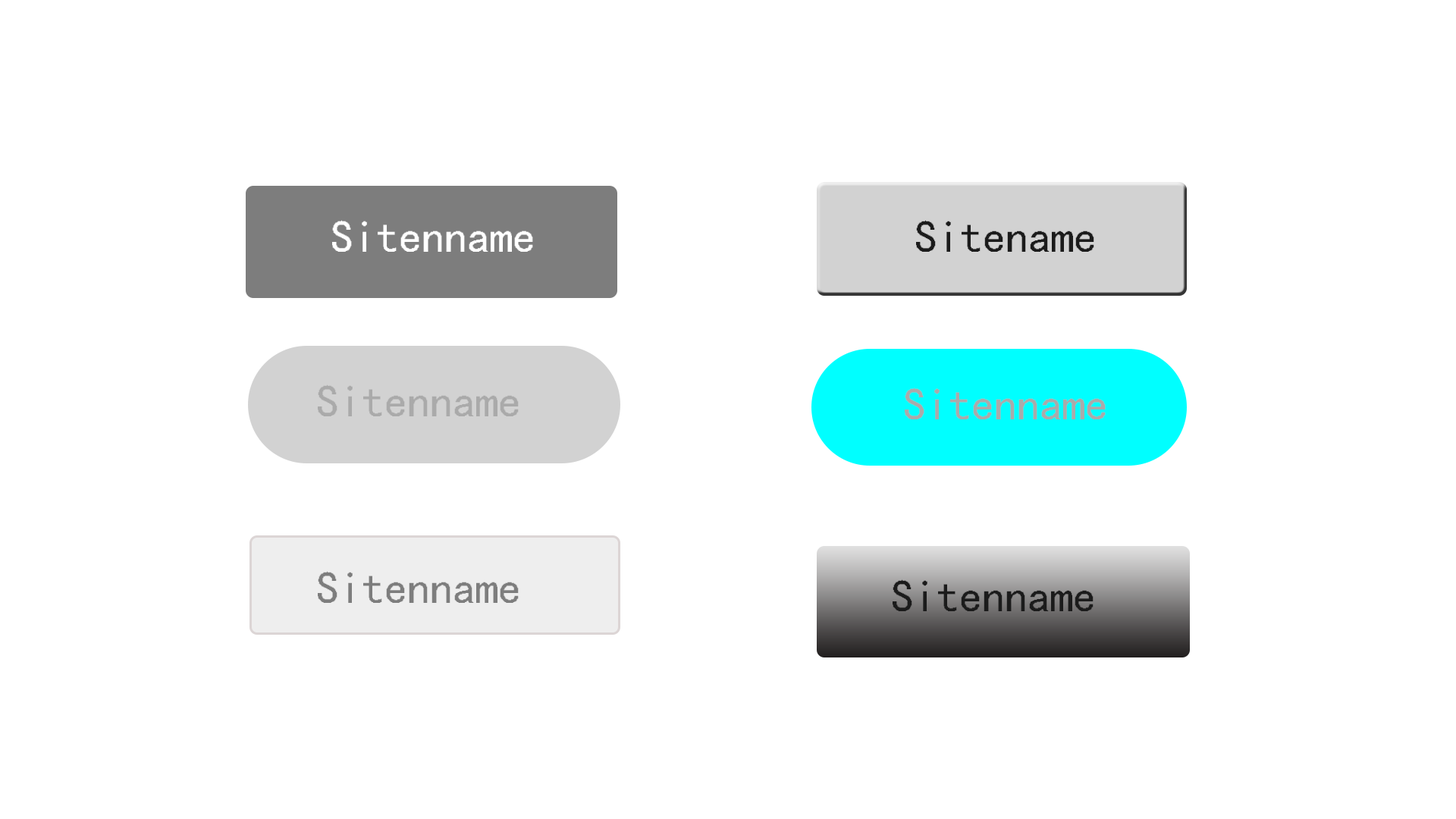
<style>
.page{position:relative;width:1456px;height:819px;background:#ffffff}
.page>*{position:absolute;margin:0}
.t1{font:45.5px "¿¬Ìå";color:#ffffff}
.t2{font:45.5px "¿¬Ìå";color:#1b1b1b}
.t3{font:45.5px "¿¬Ìå";color:#aaaaaa}
.t4{font:45.5px "¿¬Ìå";color:#7d7d7d}
</style>
<div class="page">
<p class="t1" style="left:332px;top:220px;width:201px;height:32px">Sitenname</p>
<p class="t2" style="left:916px;top:220px;width:178px;height:32px">Sitename</p>
<p class="t3" style="left:318px;top:384px;width:201px;height:32px">Sitenname</p>
<p class="t3" style="left:905px;top:388px;width:201px;height:31px">Sitenname</p>
<p class="t4" style="left:318px;top:571px;width:201px;height:32px">Sitenname</p>
<p class="t2" style="left:893px;top:579px;width:201px;height:32px">Sitenname</p>
</div>
